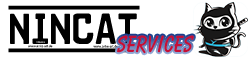
<style>
.page{position:relative;width:248px;height:58px;background:#ffffff}
.page>*{position:absolute;margin:0}
.t1{font:40px "Car-GoFrame3.1Demo";color:#000000}
.t2{font:24px "BalloonBT-Bold";color:#c61037}
</style>
<div class="page">
<p class="t1" style="left:8px;top:5px;width:132px;height:48px">NinCat</p>
<p class="t2" style="left:117px;top:35px;width:77px;height:19px">Services</p>
</div>
